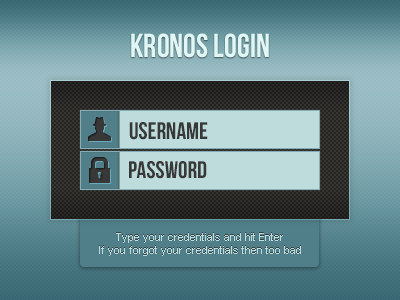
<style>
.page{position:relative;width:400px;height:300px}
.page>*{position:absolute;margin:0}
.t1{font:33px "BebasNeue";color:#e1f7f6}
.t2{font:24px "BebasNeue";color:#383838}
.t3{font:10.9px "ArialMT";color:#bddcdb}
</style>
<div class="page">
<p class="t1" style="left:131px;top:33px;width:138px;height:25px">KRONOS LOGIN</p>
<p class="t2" style="left:129px;top:122px;width:79px;height:18px">USERNAME</p>
<p class="t2" style="left:129px;top:161px;width:78px;height:18px">PASSWORD</p>
<p class="t3" style="left:99px;top:233px;width:202px;height:23px;text-align:center">Type your credentials and hit Enter<br>If you forgot your credentials then too bad</p>
</div>
